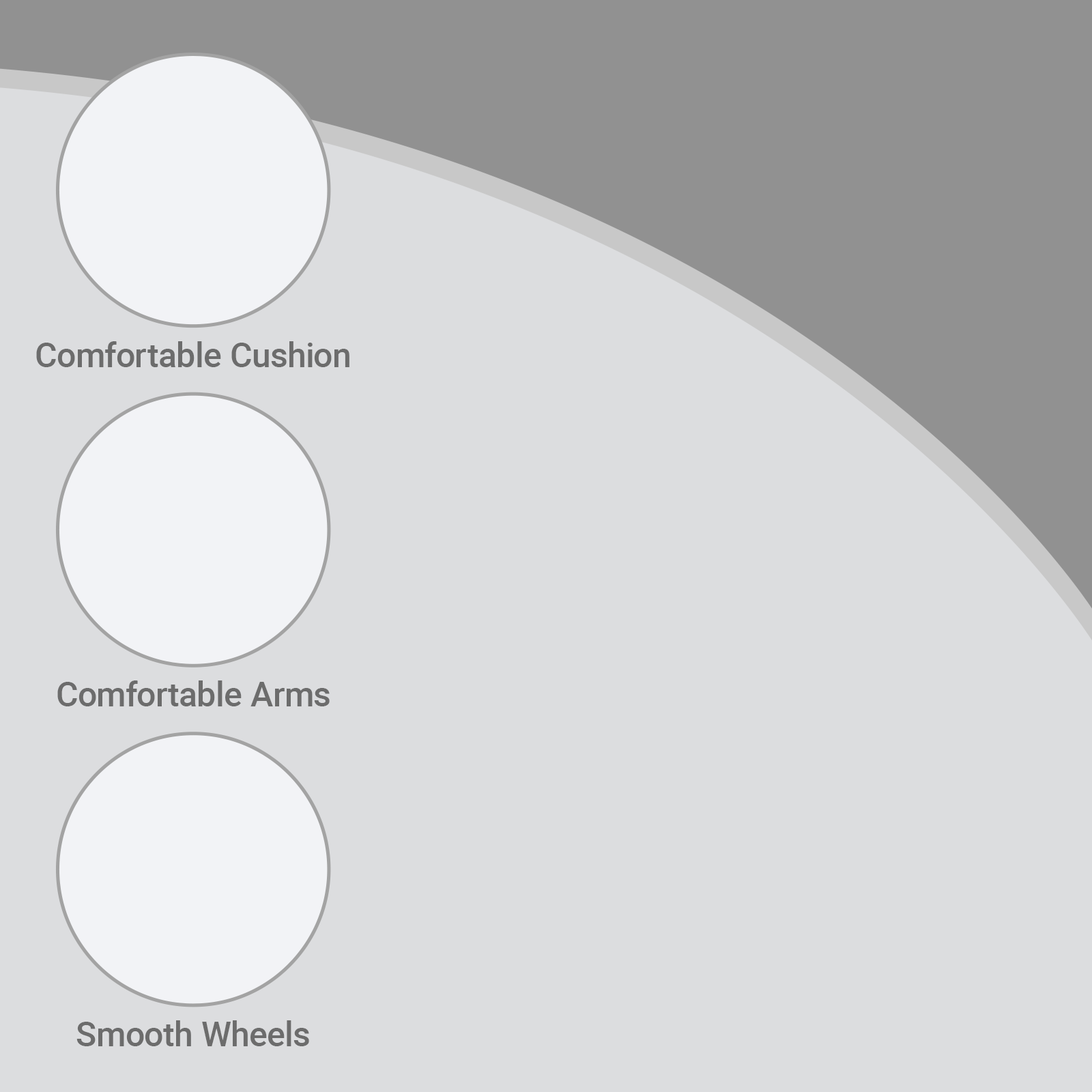
<style>
.page{position:relative;width:1092px;height:1092px;background:#dcdddf}
.page>*{position:absolute;margin:0}
.t1{font:34px "Roboto-Medium";color:#6c6c6c}
</style>
<div class="page">
<p class="t1" style="left:36px;top:341px;width:313px;height:26px">Comfortable Cushion</p>
<p class="t1" style="left:57px;top:680px;width:273px;height:26px">Comfortable Arms</p>
<p class="t1" style="left:76px;top:1020px;width:233px;height:26px">Smooth Wheels</p>
</div>
